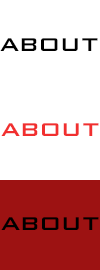
<style>
.page{position:relative;width:100px;height:270px;background:#ffffff}
.page>*{position:absolute;margin:0}
.t1{font:30px "BankGothicBT-Medium";color:#000000}
.t2{font:30px "BankGothicBT-Medium";color:#f12f2f}
</style>
<div class="page">
<p class="t1" style="left:0px;top:38px;width:98px;height:13px">about</p>
<p class="t2" style="left:1px;top:123px;width:98px;height:13px">about</p>
<p class="t1" style="left:1px;top:217px;width:98px;height:13px">about</p>
</div>
